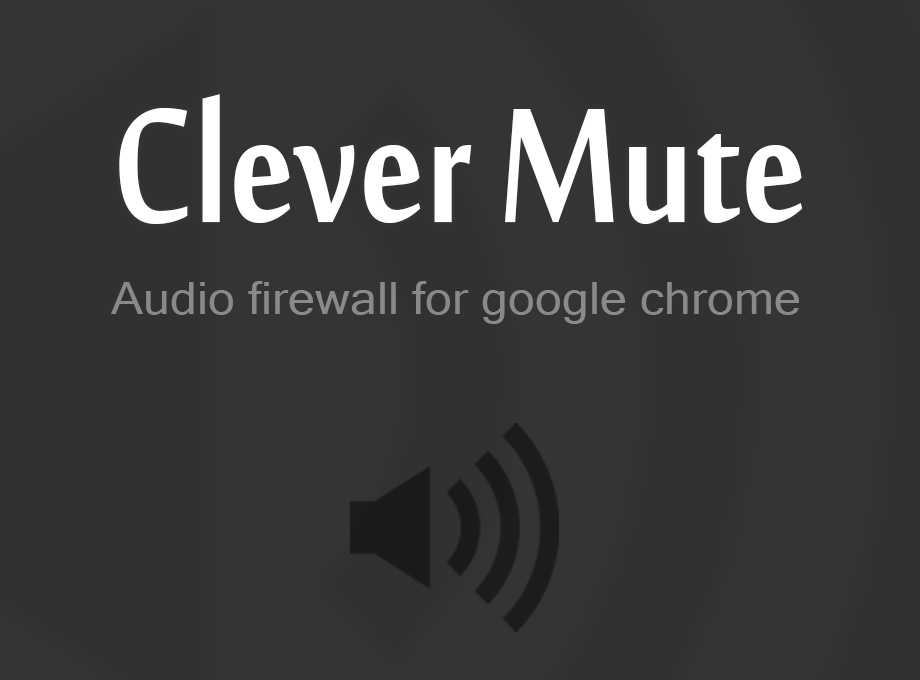
<style>
.page{position:relative;width:920px;height:680px;background:#343434}
.page>*{position:absolute;margin:0}
.t1{font:250.1px "MoolBoran";color:#ffffff;scale:0.8 1}
.t2{font:44px "MicrosoftSansSerif";color:#898989;scale:1.1 1}
</style>
<div class="page">
<p class="t1" style="left:119px;top:94px;width:684px;height:130px">Clever Mute</p>
<p class="t2" style="left:111px;top:281px;width:688px;height:43px">Audio firewall for google chrome</p>
</div>
